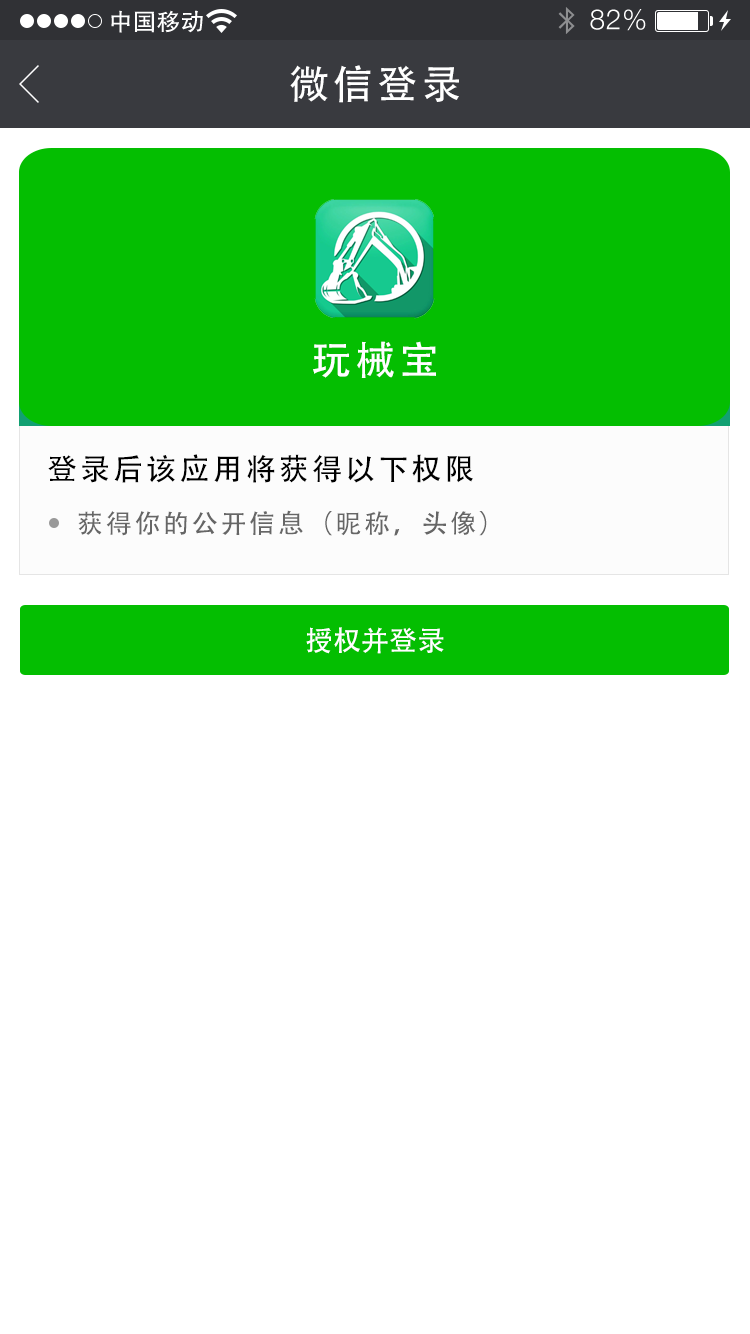
<style>
.page{position:relative;width:750px;height:1334px;background:#ffffff}
.page>*{position:absolute;margin:0}
.t1{font:40px "AdobeHeitiStd-Regular";letter-spacing:0.104em;color:#ffffff}
.t2{font:30px "AdobeHeitiStd-Regular";letter-spacing:0.104em;color:#000000}
.t3{font:26px "AdobeHeitiStd-Regular";letter-spacing:0.104em;color:#666666}
.t4{font:28px "AdobeHeitiStd-Regular";color:#ffffff}
</style>
<div class="page">
<p class="t1" style="left:290px;top:65px;width:169px;height:38px">微信登录</p>
<p class="t1" style="left:313px;top:341px;width:123px;height:37px">玩械宝</p>
<p class="t2" style="left:48px;top:454px;width:425px;height:29px">登录后该应用将获得以下权限</p>
<p class="t3" style="left:78px;top:510px;width:409px;height:26px">获得你的公开信息（昵称，头像）</p>
<p class="t4" style="left:306px;top:627px;width:138px;height:27px">授权并登录</p>
</div>
